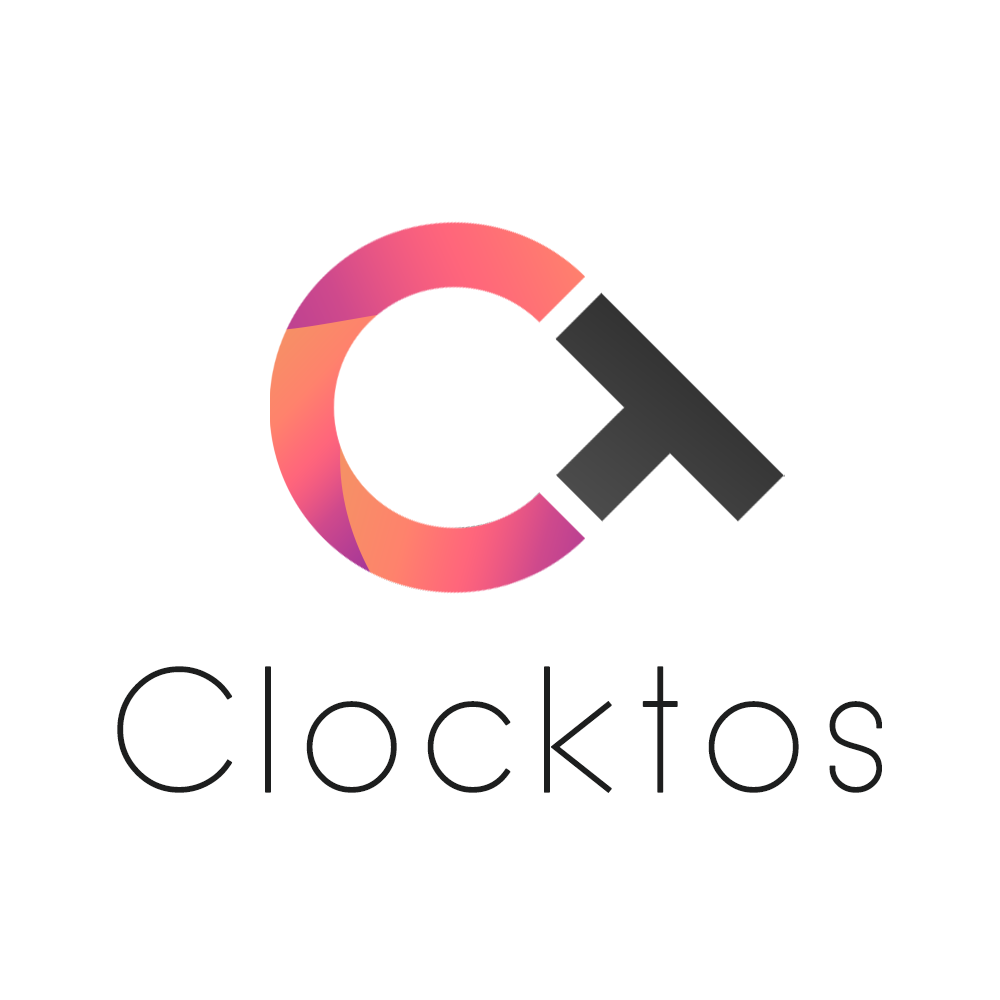
<style>
.page{position:relative;width:1000px;height:1000px;background:#ffffff}
.page>*{position:absolute;margin:0}
.t1{font:175px "TypoGroteskThin";letter-spacing:0.06em;color:#1d1e1e;font-weight:bold}
</style>
<div class="page">
<p class="t1" style="left:117px;top:666px;width:765px;height:127px">Clocktos</p>
</div>
